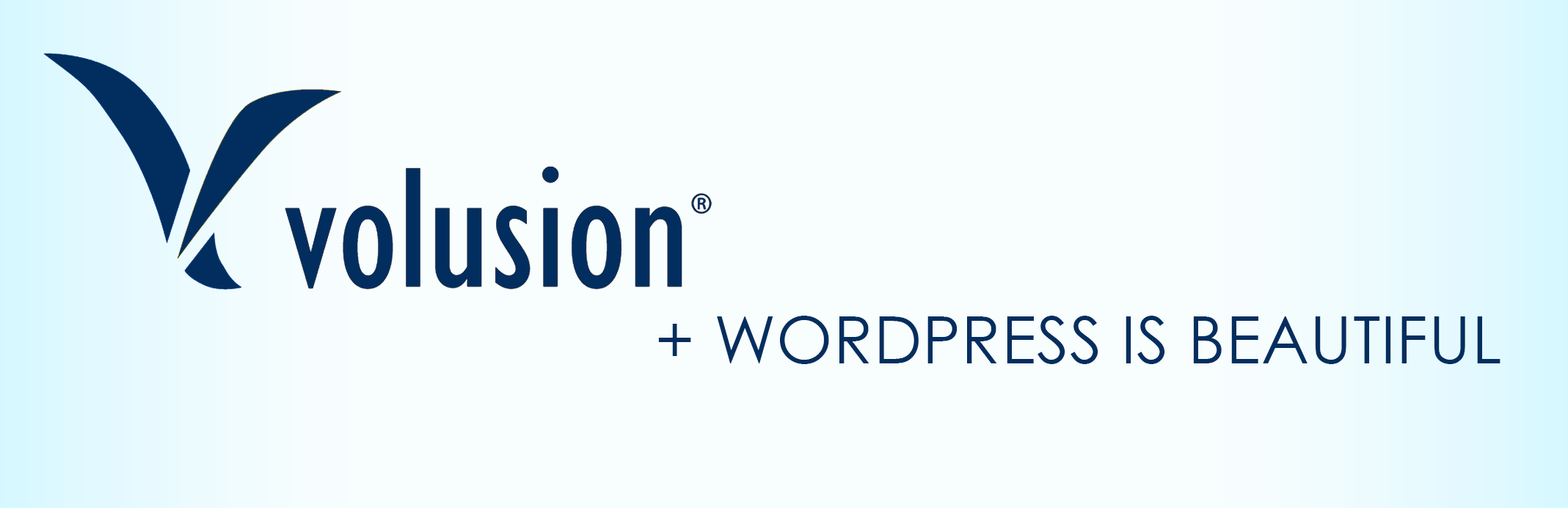
<style>
.page{position:relative;width:1568px;height:508px;background:#f8fdfe}
.page>*{position:absolute;margin:0}
.t1{font:65.3px "CenturyGothic";letter-spacing:0.01em;color:#022e5f;text-transform:uppercase}
</style>
<div class="page">
<p class="t1" style="left:658px;top:316px;width:842px;height:48px">+ WordPress is Beautiful</p>
</div>
